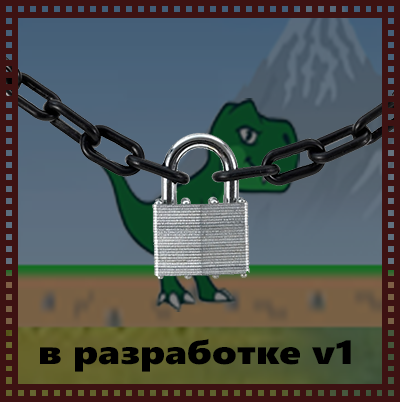
<style>
.page{position:relative;width:400px;height:402px}
.page>*{position:absolute;margin:0}
.t1{font:33.3px "SegoeUIBlack";color:#000000;scale:1.18 1}
</style>
<div class="page">
<p class="t1" style="left:40px;top:338px;width:311px;height:34px">в разработке v1</p>
</div>
